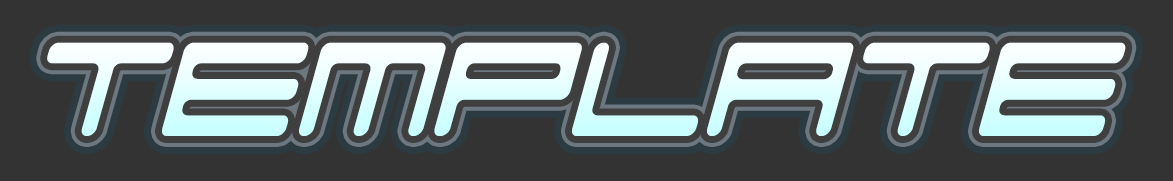
<style>
.page{position:relative;width:1173px;height:181px;background:#333333}
.page>*{position:absolute;margin:0}
.t1{font:125px "FZeroGXVenueFont-SemLtObliq";letter-spacing:-0.02em;color:#e8ffff}
</style>
<div class="page">
<p class="t1" style="left:47px;top:42px;width:1079px;height:94px">TEMPLATE</p>
</div>
